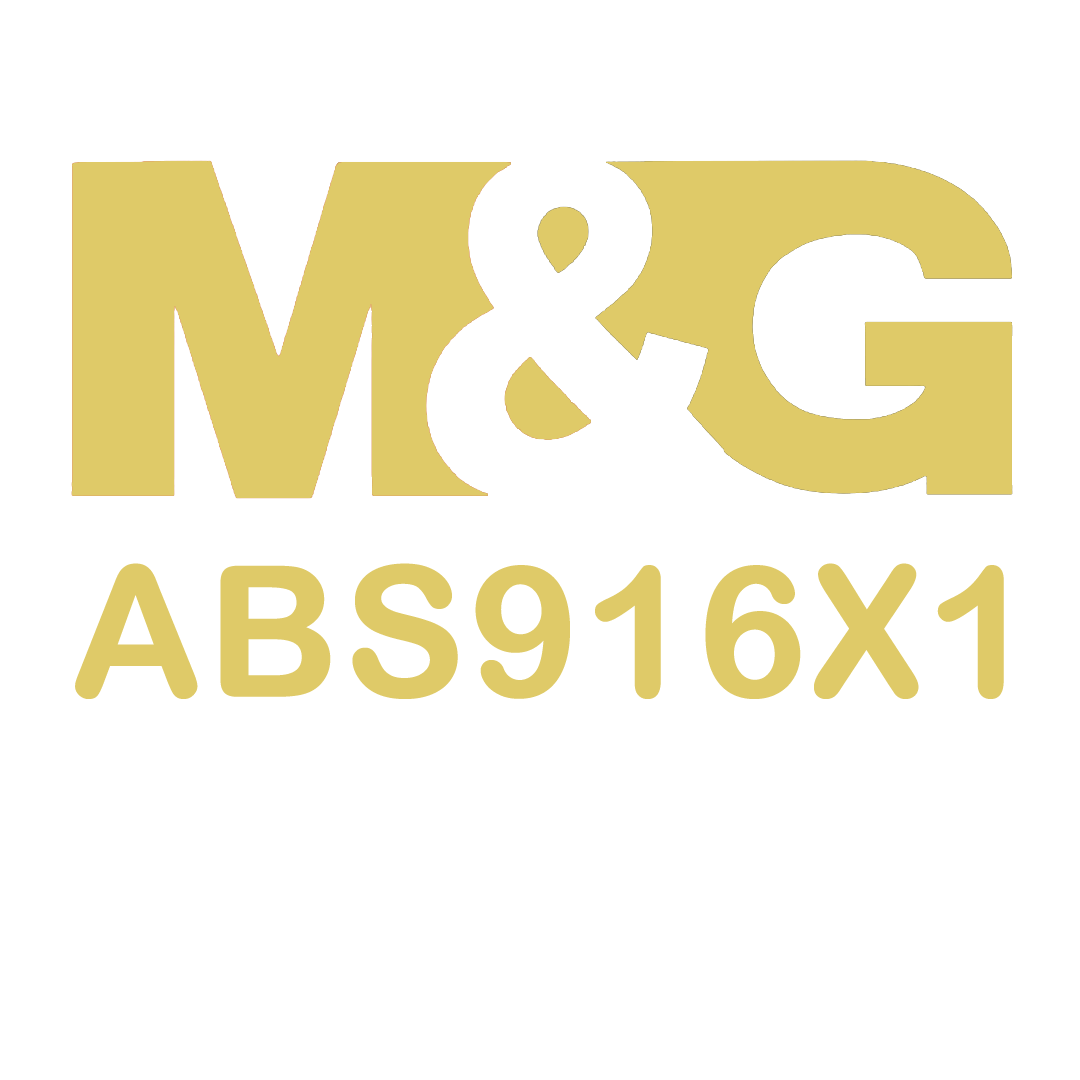
<style>
.page{position:relative;width:1080px;height:1080px;background:#ffffff}
.page>*{position:absolute;margin:0}
.t1{font:180.5px "ArialRoundedMTBold";letter-spacing:0.005em;color:#dfca68;font-weight:bold}
</style>
<div class="page">
<p class="t1" style="left:75px;top:563px;width:929px;height:136px">ABS916X1</p>
</div>
